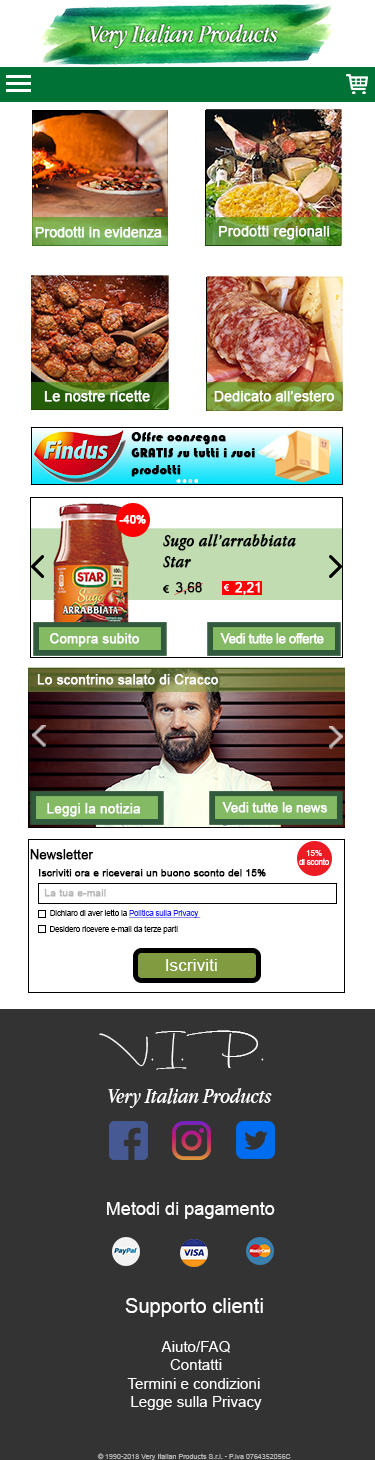
<style>
.page{position:relative;width:375px;height:1460px;background:#333333}
.page>*{position:absolute;margin:0}
.t1{font:13.7px "ArialMT";color:#ffffff;font-weight:bold}
.t2{font:14.1px "ArialMT";color:#fffefe;font-weight:bold}
.t3{font:13.6px "ArialMT";color:#fffefe;font-weight:bold}
.t4{font:13.5px "Bauhaus93";color:#010101;font-weight:bold}
.t5{font:10.9px "ArialMT";color:#ffffff;font-weight:bold}
.t6{font:17.4px "AppleGaramond-Italic";color:#000000;font-weight:bold}
.t7{font:13.1px "ArialMT";color:#000000;font-weight:bold}
.t8{font:13.1px "ArialMT";color:#ffffff;font-weight:bold}
.t9{font:13.1px "ArialMT";letter-spacing:-0.05em;color:#ffffff;font-weight:bold}
.t10{font:13px "ArialMT";color:#ffffff;font-weight:bold}
.t11{font:13px "ArialMT";letter-spacing:-0.025em;color:#ffffff;font-weight:bold}
.t12{font:12.7px "ArialMT";color:#000000;font-weight:bold}
.t13{font:8px "ArialMT";letter-spacing:-0.025em;color:#ffffff}
.t14{font:8px "ArialMT";color:#ffffff}
.t15{font:10.2px "ArialMT";color:#000000;font-weight:bold}
.t16{font:10.2px "ArialMT";color:#b8b8b8;font-weight:bold}
.t17{font:7.6px "ArialMT";color:#000000}
.t18{font:7.6px "ArialMT";color:#1c26f7;text-decoration:underline}
.t19{font:17.4px "ArialMT";color:#ffffff}
.t20{font:32.8px "DhanikansSignature2-Regular";color:#ffffff;text-transform:uppercase}
.t21{font:21.9px "AppleGaramond-Italic";color:#ffffff}
.t22{font:18.2px "ArialMT";color:#ffffff}
.t23{font:20.2px "ArialMT";color:#ffffff}
.t24{font:15.1px "ArialMT";color:#ffffff}
.t25{font:7.1px "ArialMT";color:#b1b1b1}
</style>
<div class="page">
<p class="t1" style="left:35px;top:226px;width:127px;height:12px">Prodotti in evidenza</p>
<p class="t2" style="left:219px;top:225px;width:111px;height:15px">Prodotti regionali</p>
<p class="t3" style="left:44px;top:390px;width:106px;height:12px">Le nostre ricette</p>
<p class="t3" style="left:214px;top:390px;width:120px;height:12px">Dedicato all’estero</p>
<p class="t4" style="left:131px;top:432px;width:124px;height:45px">Offre consegna GRATIS su tutti i suoi prodotti</p>
<p class="t5" style="left:119px;top:515px;width:27px;height:9px">-40%</p>
<p class="t6" style="left:163px;top:534px;width:133px;height:34px">Sugo all’arrabbiata <br>Star</p>
<p class="t7" style="left:175px;top:582px;width:27px;height:13px">3,68</p>
<p class="t8" style="left:235px;top:582px;width:25px;height:13px">2,21</p>
<p class="t8" style="left:50px;top:633px;width:89px;height:14px">Compra subito</p>
<p class="t9" style="left:220px;top:633px;width:104px;height:11px">Vedi tutte le offerte</p>
<p class="t10" style="left:37px;top:674px;width:181px;height:11px">Lo scontrino salato di Cracco</p>
<p class="t10" style="left:47px;top:803px;width:93px;height:14px">Leggi la notizia</p>
<p class="t11" style="left:222px;top:802px;width:105px;height:11px">Vedi tutte le news</p>
<p class="t12" style="left:30px;top:849px;width:64px;height:11px">Newsletter</p>
<p class="t13" style="left:299px;top:850px;width:30px;height:15px;text-align:center"><span class="t14">15%<br></span>di sconto</p>
<p class="t15" style="left:39px;top:869px;width:227px;height:8px">Iscriviti ora e riceverai un buono sconto del 15%</p>
<p class="t16" style="left:44px;top:889px;width:62px;height:8px">La tua e-mail</p>
<p class="t17" style="left:50px;top:909px;width:151px;height:9px">Dichiaro di aver letto la <span class="t18">Politica sulla Privacy</span></p>
<p class="t17" style="left:50px;top:925px;width:128px;height:9px">Desidero ricevere e-mail da terze parti</p>
<p class="t19" style="left:166px;top:959px;width:51px;height:12px">Iscriviti</p>
<p class="t20" style="left:99px;top:1030px;width:165px;height:40px">v.i.p.</p>
<p class="t21" style="left:108px;top:1088px;width:164px;height:20px">Very Italian Products</p>
<p class="t22" style="left:107px;top:1202px;width:168px;height:17px">Metodi di pagamento</p>
<p class="t23" style="left:125px;top:1298px;width:138px;height:19px">Supporto clienti</p>
<p class="t24" style="left:127px;top:1341px;width:135px;height:69px;text-align:center">Aiuto/FAQ<br>Contatti<br>Termini e condizioni <br>Legge sulla Privacy</p>
<p class="t25" style="left:97px;top:1453px;width:194px;height:7px">© 1990-2018 Very Italian Products S.r.l. - P.iva 0764352056C</p>
</div>
